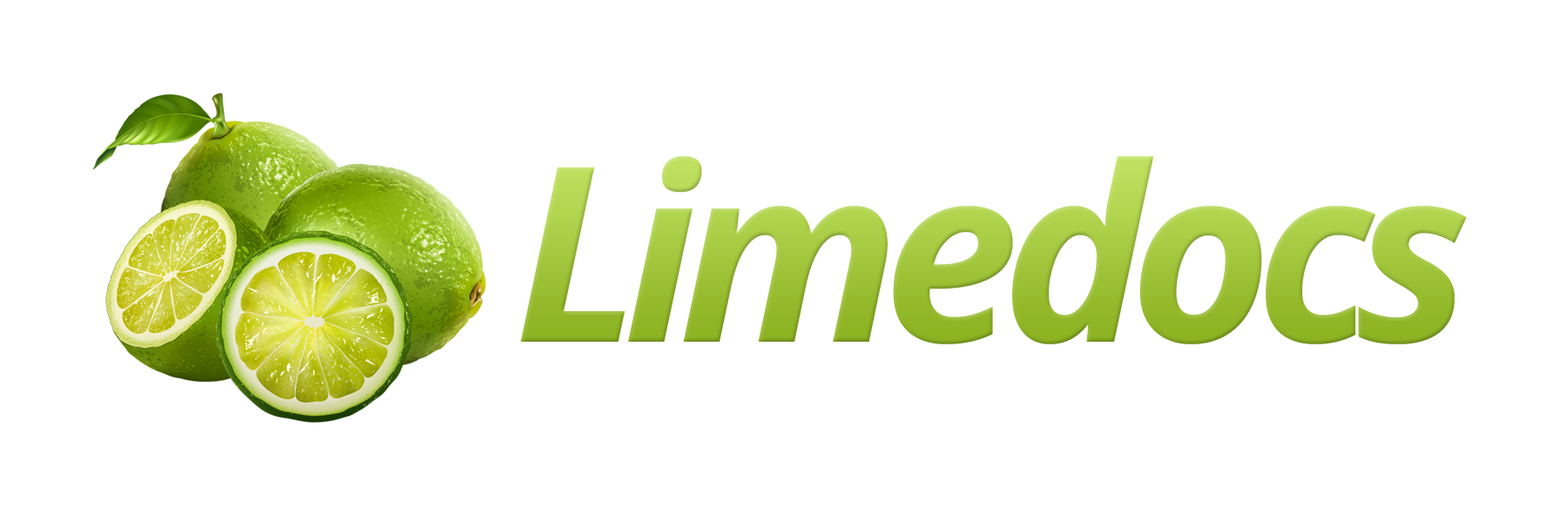
<style>
.page{position:relative;width:1568px;height:523px;background:#ffffff}
.page>*{position:absolute;margin:0}
.t1{font:243.9px "OpenSans-BoldItalic";letter-spacing:-0.07em;color:#97bb2b}
</style>
<div class="page">
<p class="t1" style="left:520px;top:156px;width:947px;height:188px">Limedocs</p>
</div>
